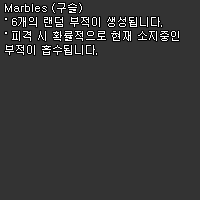
<style>
.page{position:relative;width:200px;height:200px;background:#333333}
.page>*{position:absolute;margin:0}
.t1{font:11px/14px "Dotum";color:#ffffff}
</style>
<div class="page">
<p class="t1" style="left:5px;top:3px;width:174px;height:52px">Marbles (구슬)<br>˚ 6개의 랜덤 부적이 생성됩니다.<br>˚ 피격 시 확률적으로 현재 소지중인<br>부적이 흡수됩니다.</p>
</div>
